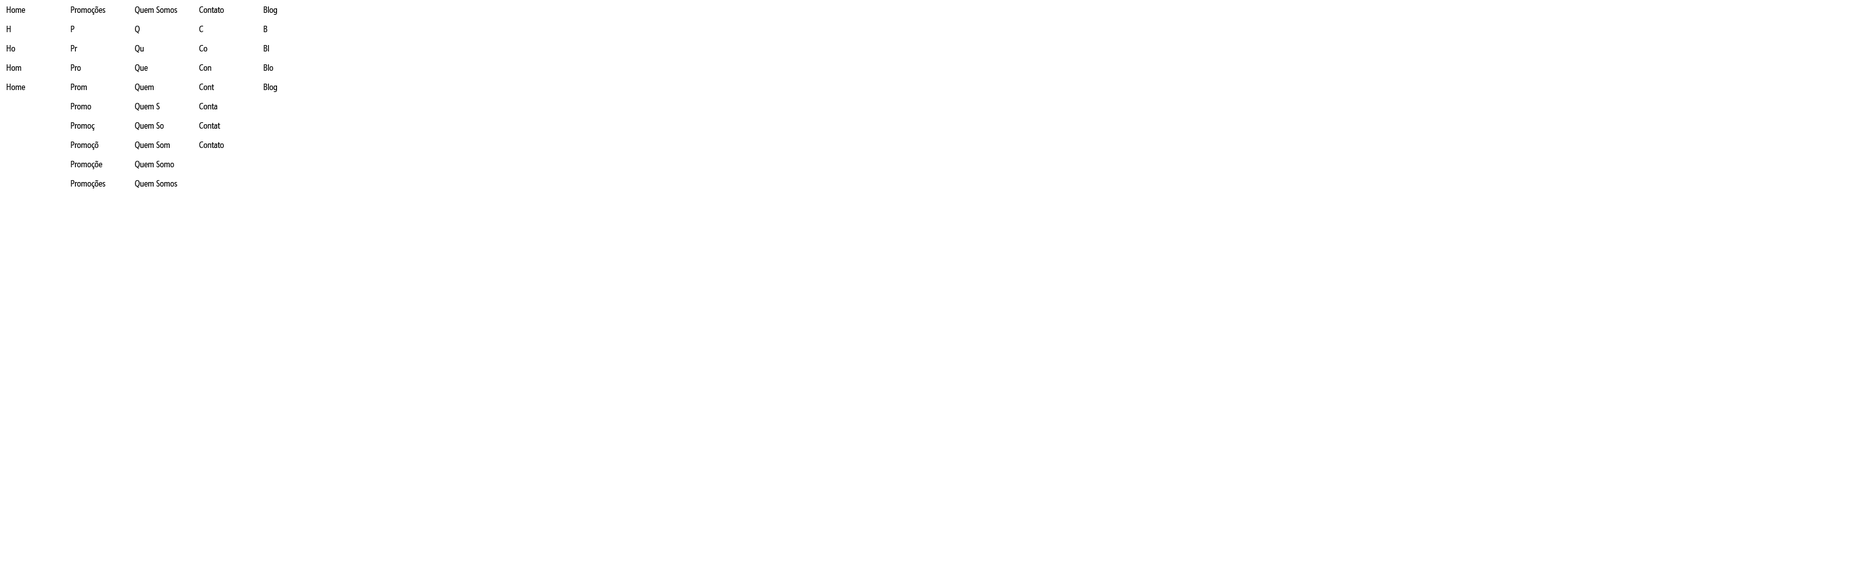
<style>
.page{position:relative;width:1851px;height:579px;background:#ffffff}
.page>*{position:absolute;margin:0}
.t1{font:9px "SegoeCondensed";color:#000000}
</style>
<div class="page">
<p class="t1" style="left:6px;top:6px;width:19px;height:7px">Home</p>
<p class="t1" style="left:71px;top:6px;width:34px;height:9px">Promoções</p>
<p class="t1" style="left:135px;top:6px;width:42px;height:8px">Quem Somos</p>
<p class="t1" style="left:199px;top:6px;width:25px;height:7px">Contato</p>
<p class="t1" style="left:264px;top:6px;width:13px;height:9px">Blog</p>
<p class="t1" style="left:6px;top:26px;width:5px;height:6px">H</p>
<p class="t1" style="left:71px;top:26px;width:4px;height:6px">P</p>
<p class="t1" style="left:135px;top:26px;width:5px;height:7px">Q</p>
<p class="t1" style="left:199px;top:26px;width:4px;height:6px">C</p>
<p class="t1" style="left:264px;top:26px;width:3px;height:6px">B</p>
<p class="t1" style="left:6px;top:45px;width:9px;height:6px">Ho</p>
<p class="t1" style="left:71px;top:45px;width:7px;height:6px">Pr</p>
<p class="t1" style="left:135px;top:45px;width:9px;height:8px">Qu</p>
<p class="t1" style="left:199px;top:45px;width:9px;height:6px">Co</p>
<p class="t1" style="left:264px;top:45px;width:5px;height:6px">Bl</p>
<p class="t1" style="left:6px;top:64px;width:15px;height:7px">Hom</p>
<p class="t1" style="left:71px;top:64px;width:10px;height:7px">Pro</p>
<p class="t1" style="left:135px;top:64px;width:13px;height:8px">Que</p>
<p class="t1" style="left:199px;top:64px;width:13px;height:7px">Con</p>
<p class="t1" style="left:264px;top:64px;width:9px;height:7px">Blo</p>
<p class="t1" style="left:6px;top:84px;width:19px;height:6px">Home</p>
<p class="t1" style="left:71px;top:84px;width:16px;height:6px">Prom</p>
<p class="t1" style="left:135px;top:84px;width:19px;height:7px">Quem</p>
<p class="t1" style="left:199px;top:84px;width:15px;height:6px">Cont</p>
<p class="t1" style="left:264px;top:84px;width:13px;height:8px">Blog</p>
<p class="t1" style="left:71px;top:103px;width:20px;height:6px">Promo</p>
<p class="t1" style="left:135px;top:103px;width:25px;height:8px">Quem S</p>
<p class="t1" style="left:199px;top:103px;width:18px;height:6px">Conta</p>
<p class="t1" style="left:71px;top:122px;width:23px;height:8px">Promoç</p>
<p class="t1" style="left:135px;top:122px;width:29px;height:8px">Quem So</p>
<p class="t1" style="left:199px;top:122px;width:22px;height:7px">Contat</p>
<p class="t1" style="left:71px;top:141px;width:27px;height:9px">Promoçõ</p>
<p class="t1" style="left:135px;top:141px;width:35px;height:8px">Quem Som</p>
<p class="t1" style="left:199px;top:141px;width:25px;height:7px">Contato</p>
<p class="t1" style="left:71px;top:161px;width:31px;height:8px">Promoçõe</p>
<p class="t1" style="left:135px;top:161px;width:39px;height:7px">Quem Somo</p>
<p class="t1" style="left:71px;top:180px;width:34px;height:8px">Promoções</p>
<p class="t1" style="left:135px;top:180px;width:42px;height:8px">Quem Somos</p>
</div>
